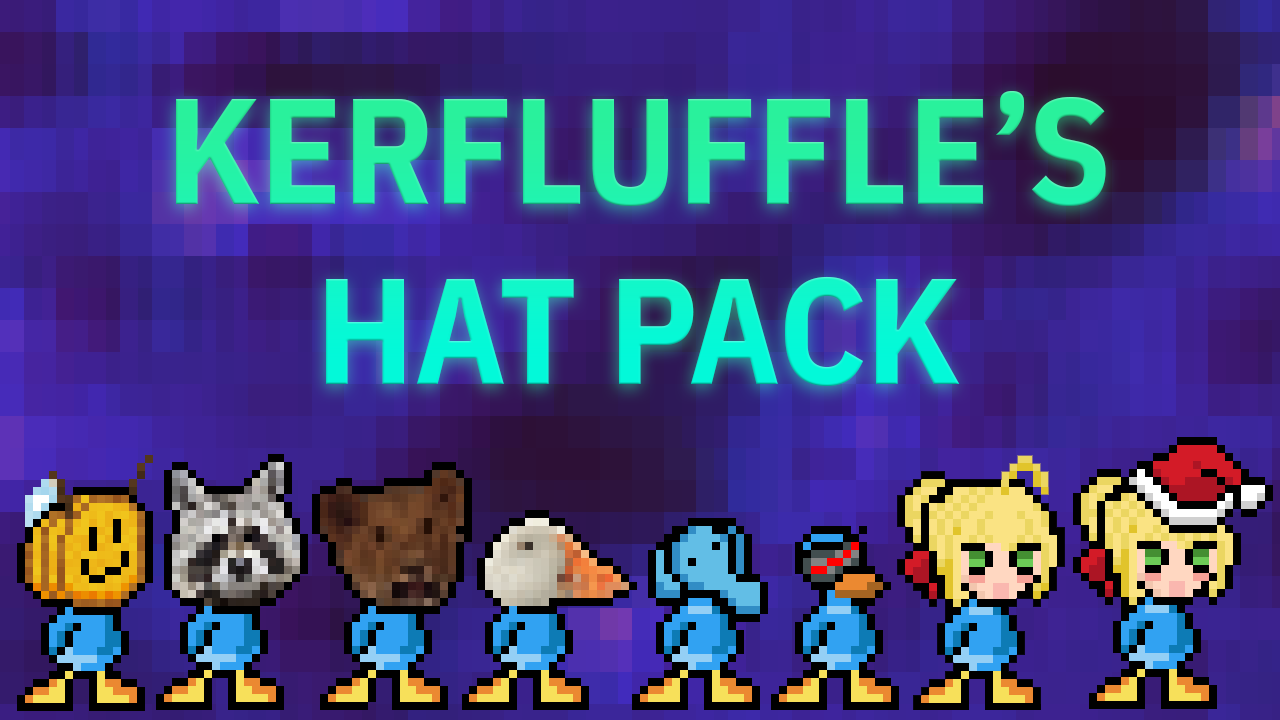
<style>
.page{position:relative;width:1280px;height:720px}
.page>*{position:absolute;margin:0}
.t1{font:150px "IBMPlexSansCond-Bold"}
</style>
<div class="page">
<p class="t1" style="left:176px;top:91px;width:930px;height:296px;text-align:center">KERFLUFFLE’S<br>HAT PACK</p>
</div>
